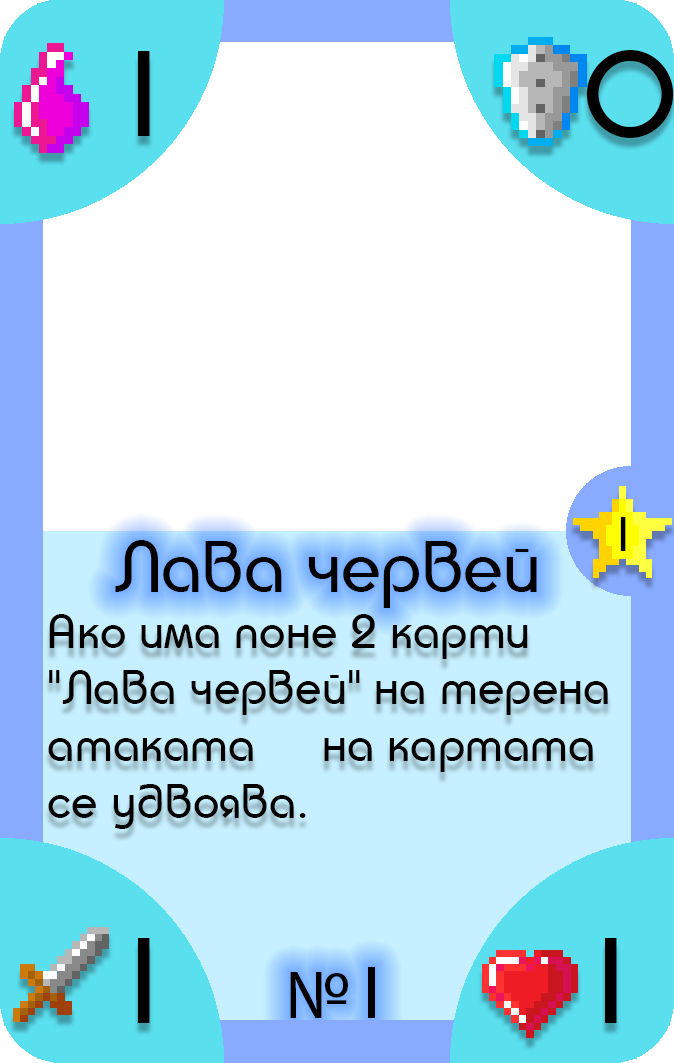
<style>
.page{position:relative;width:674px;height:1063px;background:#ffffff}
.page>*{position:absolute;margin:0}
.t1{font:118.1px "TaurusNormal";color:#000000}
.t2{font:47.2px "TaurusNormal";color:#000000}
.t3{font:70.9px "TaurusNormal";color:#000000}
.t4{font:70.9px "MyriadPro-Regular";color:#000000}
</style>
<div class="page">
<p class="t1" style="left:137px;top:51px;width:13px;height:85px">1</p>
<p class="t1" style="left:586px;top:50px;width:88px;height:88px">0</p>
<p class="t2" style="left:620px;top:517px;width:6px;height:34px">1</p>
<p class="t3" style="left:115px;top:540px;width:422px;height:478px;text-align:center">Лава червей <br><br><br><br><br><span class="t4">№</span>1</p>
<p class="t2" style="left:48px;top:614px;width:560px;height:215px">Ако има поне 2 карти<br>"Лава червей" на терена<br>атаката     на картата <br>се удвоява.</p>
<p class="t1" style="left:137px;top:938px;width:13px;height:85px">1</p>
<p class="t1" style="left:604px;top:938px;width:13px;height:85px">1</p>
</div>
